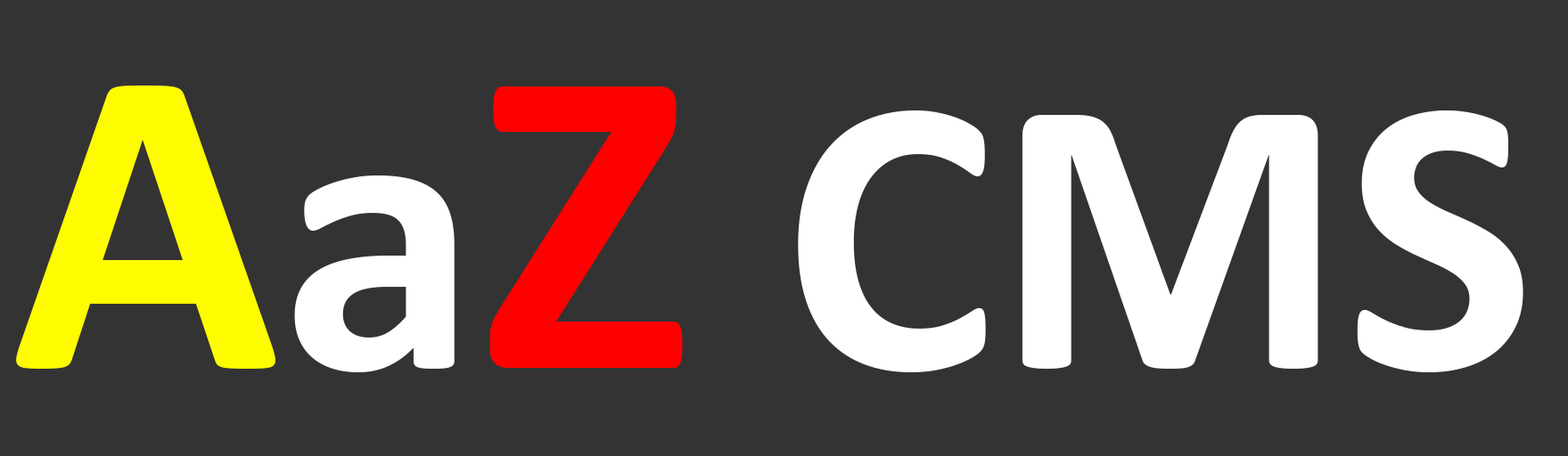
<style>
.page{position:relative;width:1568px;height:456px;background:#333333}
.page>*{position:absolute;margin:0}
.t1{font:401.1px "Calibri-Bold";color:#ffffff}
.t2{font:445.7px "Calibri-Bold";color:#fffc00}
.t3{font:445.7px "Calibri-Bold";color:#ff0000}
</style>
<div class="page">
<p class="t1" style="left:16px;top:86px;width:1507px;height:287px"><span class="t2">A</span>a<span class="t3">Z </span>CMS</p>
</div>
